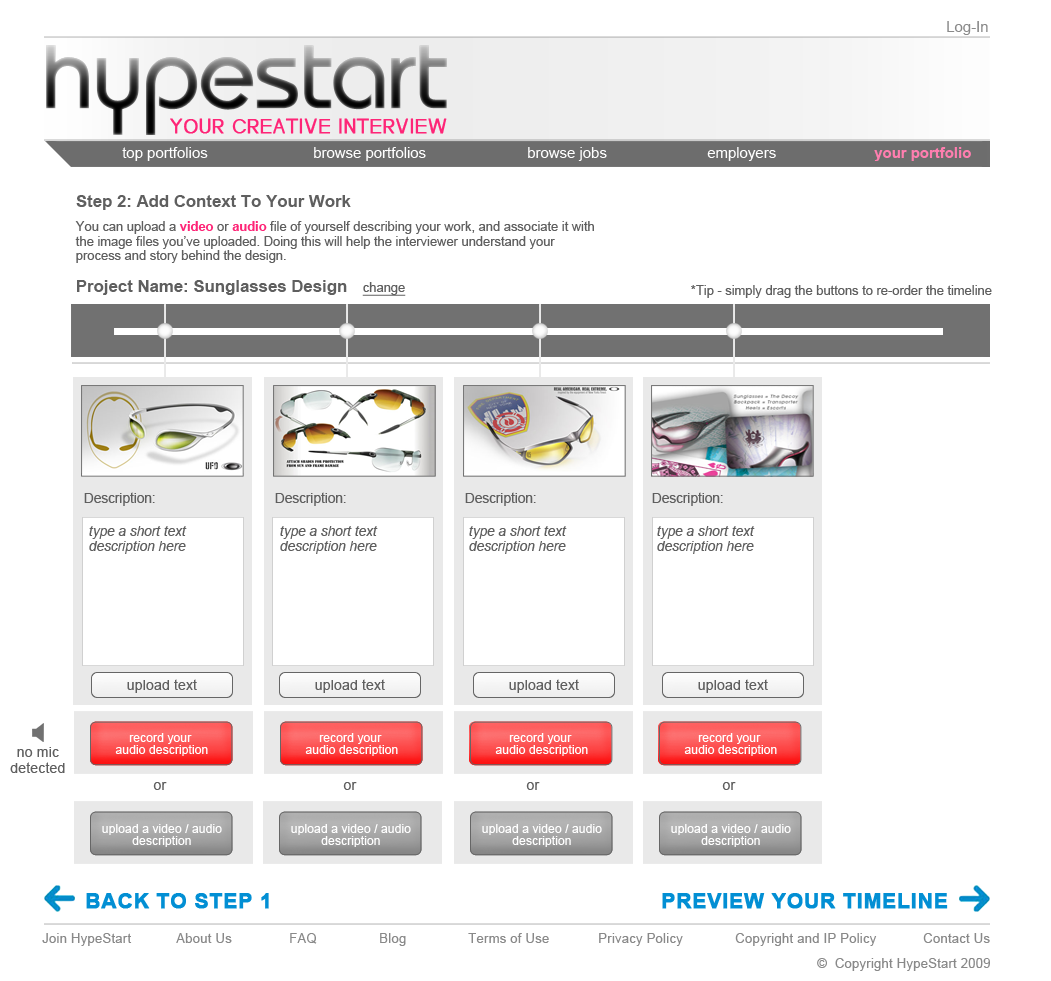
<style>
.page{position:relative;width:1051px;height:981px;background:#ffffff}
.page>*{position:absolute;margin:0}
.t1{font:14.9px "ArialMT";color:#898989}
.t2{font:20.1px "HeoMay11";letter-spacing:0.02em;color:#fe2577;font-weight:bold}
.t3{font:14.9px "ArialMT";color:#ffffff}
.t4{font:14.9px "Arial-BoldMT";color:#ff7eaf}
.t5{font:16.8px "Arial-BoldMT";color:#5f5f5f}
.t6{font:12.9px/14.4px "ArialMT";color:#5f5f5f}
.t7{font:12.9px/14.4px "Arial-BoldMT";color:#fe2577}
.t8{font:12.9px "ArialMT";color:#5f5f5f;text-decoration:underline}
.t9{font:12.9px "ArialMT";color:#5f5f5f}
.t10{font:13.6px "ArialMT";color:#5f5f5f}
.t11{font:13.6px/15.2px "Arial-ItalicMT";color:#5f5f5f}
.t12{font:14.4px "ArialMT";color:#5f5f5f}
.t13{font:12.3px/12px "ArialMT";color:#ffffff}
.t14{font:14.4px/16px "ArialMT";color:#5f5f5f}
.t15{font:21px "Arial-BoldMT";letter-spacing:0.02em;color:#028fd4;font-weight:bold}
.t16{font:13px "ArialMT";letter-spacing:0.02em;color:#898989}
</style>
<div class="page">
<p class="t1" style="left:947px;top:21px;width:41px;height:14px">Log-In</p>
<p class="t2" style="left:170px;top:118px;width:277px;height:16px">YOUR CREATIVE INTERVIEW</p>
<p class="t3" style="left:122px;top:147px;width:86px;height:14px">top portfolios</p>
<p class="t3" style="left:314px;top:147px;width:112px;height:14px">browse portfolios</p>
<p class="t3" style="left:528px;top:147px;width:79px;height:14px">browse jobs</p>
<p class="t3" style="left:707px;top:147px;width:69px;height:14px">employers</p>
<p class="t4" style="left:874px;top:147px;width:97px;height:14px">your portfolio</p>
<p class="t5" style="left:76px;top:195px;width:275px;height:15px">Step 2: Add Context To Your Work</p>
<p class="t6" style="left:75px;top:221px;width:519px;height:42px">You can upload a <span class="t7">video </span>or <span class="t7">audio </span>file of yourself describing your work, and associate it with<br>the image files you’ve uploaded. Doing this will help the interviewer understand your<br>process and story behind the design.</p>
<p class="t5" style="left:77px;top:280px;width:270px;height:15px">Project Name: Sunglasses Design</p>
<p class="t8" style="left:362px;top:282px;width:44px;height:14px">change</p>
<p class="t9" style="left:691px;top:285px;width:301px;height:13px">*Tip - simply drag the buttons to re-order the timeline</p>
<p class="t10" style="left:84px;top:492px;width:71px;height:14px">Description:</p>
<p class="t10" style="left:275px;top:492px;width:71px;height:14px">Description:</p>
<p class="t10" style="left:465px;top:492px;width:71px;height:14px">Description:</p>
<p class="t10" style="left:652px;top:492px;width:71px;height:14px">Description:</p>
<p class="t11" style="left:89px;top:526px;width:98px;height:28px">type a short text <br>description here</p>
<p class="t11" style="left:280px;top:526px;width:98px;height:28px">type a short text <br>description here</p>
<p class="t11" style="left:469px;top:526px;width:98px;height:28px">type a short text <br>description here</p>
<p class="t11" style="left:657px;top:526px;width:98px;height:28px">type a short text <br>description here</p>
<p class="t12" style="left:127px;top:679px;width:70px;height:14px">upload text</p>
<p class="t12" style="left:315px;top:679px;width:70px;height:14px">upload text</p>
<p class="t12" style="left:509px;top:679px;width:70px;height:14px">upload text</p>
<p class="t12" style="left:698px;top:679px;width:70px;height:14px">upload text</p>
<p class="t13" style="left:115px;top:733px;width:93px;height:23px;text-align:center">record your <br>audio description</p>
<p class="t13" style="left:305px;top:733px;width:93px;height:23px;text-align:center">record your <br>audio description</p>
<p class="t13" style="left:495px;top:733px;width:93px;height:23px;text-align:center">record your <br>audio description</p>
<p class="t13" style="left:684px;top:733px;width:93px;height:23px;text-align:center">record your <br>audio description</p>
<p class="t14" style="left:10px;top:747px;width:55px;height:26px;text-align:center">no mic<br>detected</p>
<p class="t12" style="left:153px;top:782px;width:14px;height:8px">or</p>
<p class="t12" style="left:343px;top:782px;width:14px;height:8px">or</p>
<p class="t12" style="left:526px;top:782px;width:14px;height:8px">or</p>
<p class="t12" style="left:722px;top:782px;width:14px;height:8px">or</p>
<p class="t13" style="left:102px;top:824px;width:120px;height:23px;text-align:center">upload a video / audio<br>description</p>
<p class="t13" style="left:291px;top:824px;width:120px;height:23px;text-align:center">upload a video / audio<br>description</p>
<p class="t13" style="left:482px;top:824px;width:120px;height:23px;text-align:center">upload a video / audio<br>description</p>
<p class="t13" style="left:671px;top:824px;width:120px;height:23px;text-align:center">upload a video / audio<br>description</p>
<p class="t15" style="left:86px;top:893px;width:183px;height:16px">BACK TO STEP 1</p>
<p class="t15" style="left:662px;top:893px;width:286px;height:16px">PREVIEW YOUR TIMELINE</p>
<p class="t16" style="left:42px;top:933px;width:90px;height:13px">Join HypeStart</p>
<p class="t16" style="left:176px;top:933px;width:56px;height:10px">About Us</p>
<p class="t16" style="left:290px;top:933px;width:27px;height:11px">FAQ</p>
<p class="t16" style="left:380px;top:933px;width:26px;height:13px">Blog</p>
<p class="t16" style="left:468px;top:933px;width:81px;height:10px">Terms of Use</p>
<p class="t16" style="left:599px;top:933px;width:84px;height:13px">Privacy Policy</p>
<p class="t16" style="left:735px;top:933px;width:142px;height:13px">Copyright and IP Policy</p>
<p class="t16" style="left:923px;top:933px;width:67px;height:10px">Contact Us</p>
<p class="t16" style="left:817px;top:958px;width:173px;height:13px">©  Copyright HypeStart 2009</p>
</div>
